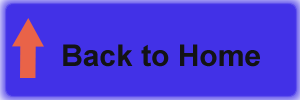
<style>
.page{position:relative;width:300px;height:100px;background:#4231e7}
.page>*{position:absolute;margin:0}
.t1{font:30px "Arial-BoldMT";color:#131315}
</style>
<div class="page">
<p class="t1" style="left:63px;top:44px;width:197px;height:23px">Back to Home</p>
</div>
